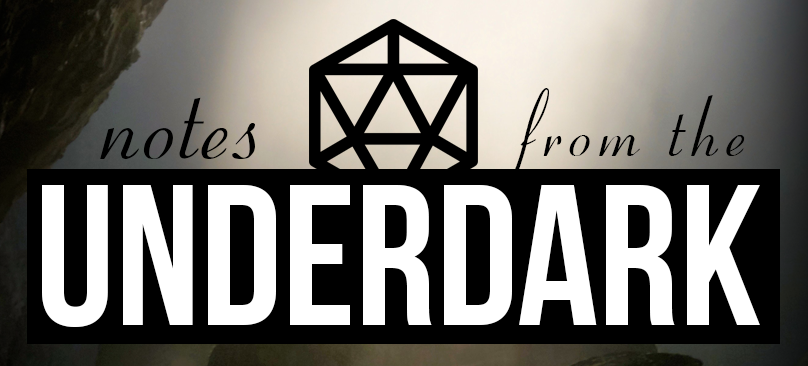
<style>
.page{position:relative;width:808px;height:366px;background:#000000}
.page>*{position:absolute;margin:0}
.t1{font:100px "OhioScript";letter-spacing:0.06em;color:#000000}
.t2{font:145px "OhioScript";color:#000000}
.t3{font:200px "BebasNeue";color:#ffffff}
</style>
<div class="page">
<p class="t1" style="left:511px;top:88px;width:234px;height:89px">from the</p>
<p class="t2" style="left:100px;top:97px;width:155px;height:62px">notes</p>
<p class="t3" style="left:42px;top:185px;width:718px;height:142px">Underdark</p>
</div>
